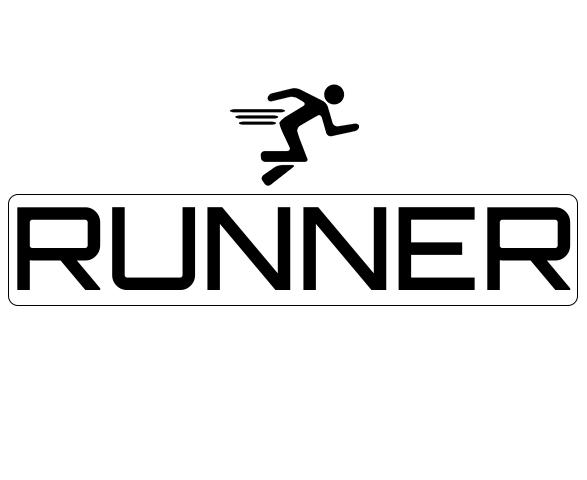
<style>
.page{position:relative;width:587px;height:480px;background:#ffffff}
.page>*{position:absolute;margin:0}
.t1{font:115px "Orbitron-Medium";color:#000000}
</style>
<div class="page">
<p class="t1" style="left:17px;top:207px;width:554px;height:83px">RUNNER</p>
</div>
